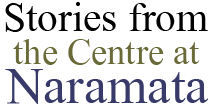
<style>
.page{position:relative;width:210px;height:106px;background:#ffffff}
.page>*{position:absolute;margin:0}
.t1{font:50px "ShonarBangla";color:#000000}
.t2{font:44px "ShonarBangla";color:#696a38}
.t3{font:63px "ShonarBangla";color:#383a6a}
</style>
<div class="page">
<p class="t1" style="left:5px;top:2px;width:203px;height:30px">Stories from</p>
<p class="t2" style="left:13px;top:39px;width:187px;height:26px">the Centre at</p>
<p class="t3" style="left:5px;top:69px;width:203px;height:35px">Naramata</p>
</div>
